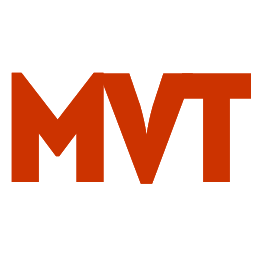
<style>
.page{position:relative;width:260px;height:260px;background:#ffffff}
.page>*{position:absolute;margin:0}
.t1{font:155px "IntroCondBlackFree";color:#cc3300}
</style>
<div class="page">
<p class="t1" style="left:11px;top:72px;width:240px;height:112px">MVT</p>
</div>
